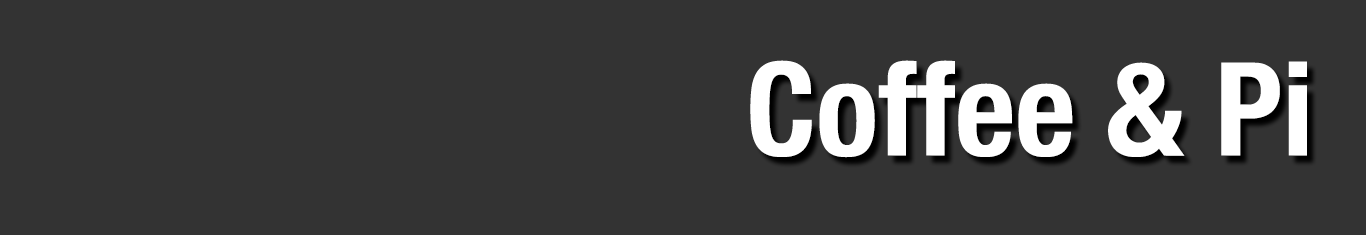
<style>
.page{position:relative;width:1366px;height:235px;background:#333333}
.page>*{position:absolute;margin:0}
.t1{font:130px "HelveticaNeue-CondensedBold";color:#ffffff}
</style>
<div class="page">
<p class="t1" style="left:750px;top:60px;width:557px;height:98px">Coffee &amp; Pi</p>
</div>
